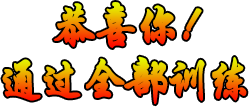
<style>
.page{position:relative;width:249px;height:107px;background:#ffffff}
.page>*{position:absolute;margin:0}
.t1{font:48px "STXingkai";letter-spacing:-0.08em;font-weight:bold;scale:0.93 1}
</style>
<div class="page">
<p class="t1" style="left:53px;top:2px;width:149px;height:46px">恭喜你！</p>
<p class="t1" style="left:2px;top:56px;width:245px;height:49px">通过全部训练</p>
</div>
